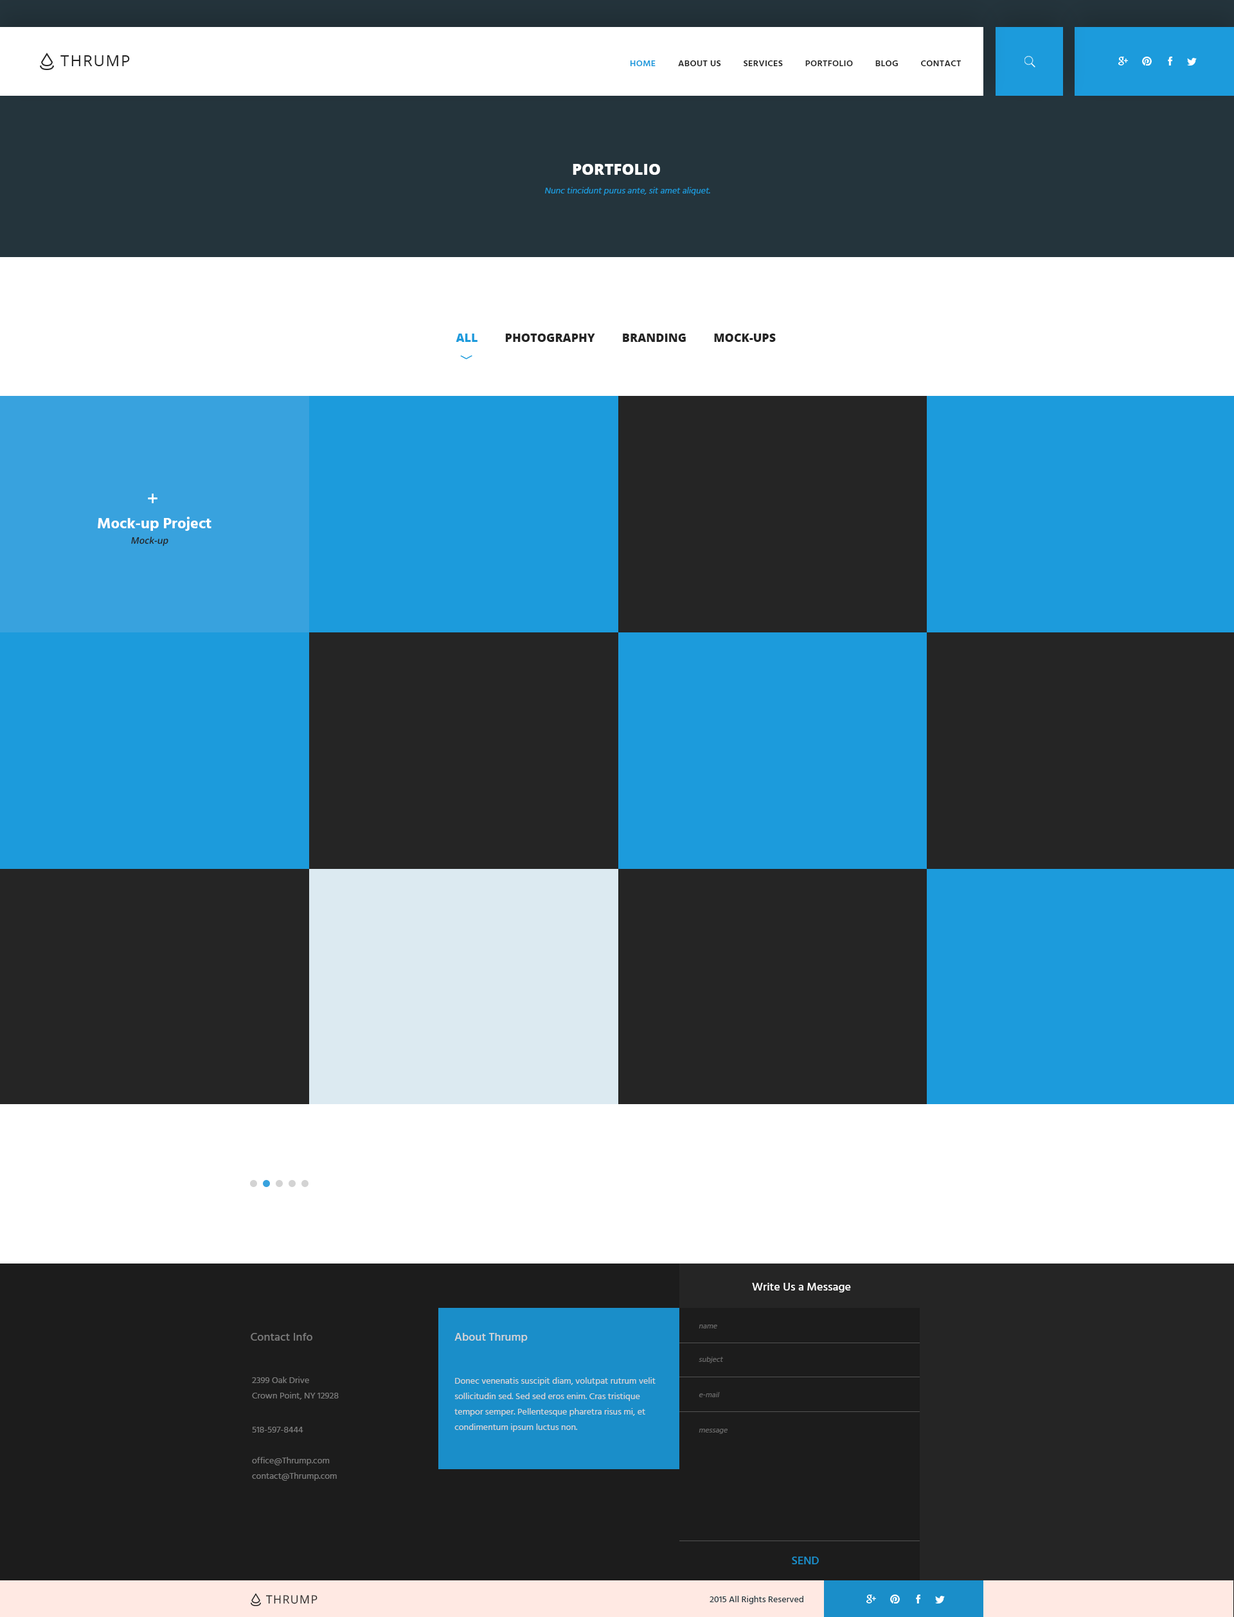
<style>
.page{position:relative;width:1234px;height:1617px;background:#252525}
.page>*{position:absolute;margin:0}
.t1{font:15.4px "OpenSans";letter-spacing:0.075em;color:#252525;text-transform:uppercase}
.t2{font:9px "Hind-Semibold";letter-spacing:0.025em;color:#252525;text-transform:uppercase}
.t3{font:9px "Hind-Semibold";letter-spacing:0.025em;color:#1c9bdc;text-transform:uppercase}
.t4{font:15.4px "OpenSans-Extrabold";color:#ffffff;text-transform:uppercase}
.t5{font:9px "Hind-Regular";color:#1c9bdc;font-style:italic}
.t6{font:11.6px "OpenSans-Extrabold";color:#252525;text-transform:uppercase}
.t7{font:11.6px "OpenSans-Extrabold";color:#1c9bdc;text-transform:uppercase}
.t8{font:19.3px "OpenSans-Semibold";color:#ffffff}
.t9{font:15.4px "Hind-Bold";color:#ffffff}
.t10{font:9px "OpenSans-Semibold";color:#252525;font-style:italic}
.t11{font:11.6px "Hind-Medium";color:#ffffff}
.t12{font:7.7px "Hind-Regular";color:#686868;font-style:italic}
.t13{font:11.6px "Hind-Medium";color:#7b7b7b}
.t14{font:11.6px "Hind-Medium";color:#d6d6d6}
.t15{font:9px/15.4px "Hind-Regular";color:#7b7b7b}
.t16{font:9px/15.4px "Hind-Regular";color:#d6d6d6}
.t17{font:9px "Hind-Regular";color:#7b7b7b}
.t18{font:11.6px "Hind-Medium";color:#1a8ec9}
.t19{font:11.4px "OpenSans";letter-spacing:0.075em;color:#252525;text-transform:uppercase}
.t20{font:9px "Hind-Medium";color:#273941}
</style>
<div class="page">
<p class="t1" style="left:60px;top:55px;width:70px;height:11px">Thrump</p>
<p class="t2" style="left:630px;top:60px;width:332px;height:6px"><span class="t3">Home</span>         About Us         Services         Portfolio         Blog         Contact</p>
<p class="t4" style="left:573px;top:164px;width:87px;height:11px">Portfolio</p>
<p class="t5" style="left:545px;top:187px;width:165px;height:8px">Nunc tincidunt purus ante, sit amet aliquet.</p>
<p class="t6" style="left:456px;top:334px;width:320px;height:8px"><span class="t7">All         </span>Photography         Branding         Mock-ups</p>
<p class="t8" style="left:148px;top:494px;width:10px;height:9px">+</p>
<p class="t9" style="left:98px;top:517px;width:114px;height:14px">Mock-up Project</p>
<p class="t10" style="left:131px;top:537px;width:37px;height:9px">Mock-up</p>
<p class="t11" style="left:752px;top:1283px;width:99px;height:10px">Write Us a Message</p>
<p class="t12" style="left:699px;top:1325px;width:18px;height:4px">name</p>
<p class="t13" style="left:251px;top:1333px;width:61px;height:8px">Contact Info</p>
<p class="t14" style="left:455px;top:1333px;width:73px;height:10px">About Thrump</p>
<p class="t12" style="left:699px;top:1357px;width:24px;height:7px">subject</p>
<p class="t15" style="left:252px;top:1377px;width:87px;height:23px">2399 Oak Drive<br>Crown Point, NY 12928</p>
<p class="t16" style="left:455px;top:1378px;width:201px;height:54px">Donec venenatis suscipit diam, volutpat rutrum velit sollicitudin sed. Sed sed eros enim. Cras tristique tempor semper. Pellentesque pharetra risus mi, et condimentum ipsum luctus non.</p>
<p class="t12" style="left:699px;top:1392px;width:21px;height:6px">e-mail</p>
<p class="t17" style="left:252px;top:1427px;width:51px;height:6px">518-597-8444</p>
<p class="t12" style="left:699px;top:1429px;width:29px;height:5px">message</p>
<p class="t15" style="left:252px;top:1457px;width:85px;height:24px">office@Thrump.com<br>contact@Thrump.com</p>
<p class="t18" style="left:792px;top:1557px;width:27px;height:8px">SEND</p>
<p class="t19" style="left:266px;top:1596px;width:52px;height:9px">Thrump</p>
<p class="t20" style="left:710px;top:1596px;width:94px;height:9px">2015 All Rights Reserved</p>
</div>
